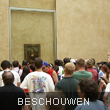
<style>
.page{position:relative;width:110px;height:110px}
.page>*{position:absolute;margin:0}
.t1{font:10px "ArialMT";color:#cac8c5}
</style>
<div class="page">
<p class="t1" style="left:18px;top:98px;width:71px;height:7px">BESCHOUWEN</p>
</div>
